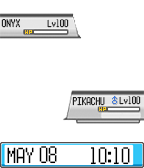
<style>
.page{position:relative;width:144px;height:168px;background:#ffffff}
.page>*{position:absolute;margin:0}
.t1{font:10px "Power-Red-and-Blue-Intl";color:#000000}
.t2{font:9px "Power-Red-and-Blue-Intl"}
.t3{font:10px "Power-Red-and-Blue-Intl"}
.t4{font:20px "Power-Red-and-Blue-Intl";color:#000000}
</style>
<div class="page">
<p class="t1" style="left:1px;top:19px;width:19px;height:9px">ONYX</p>
<p class="t2" style="left:47px;top:19px;width:22px;height:9px">Lv100</p>
<p class="t3" style="left:72px;top:97px;width:33px;height:9px">PIKACHU</p>
<p class="t2" style="left:119px;top:96px;width:22px;height:9px">Lv100</p>
<p class="t4" style="left:7px;top:146px;width:50px;height:18px">MAY 08</p>
<p class="t4" style="left:90px;top:147px;width:40px;height:18px">10:10</p>
</div>
